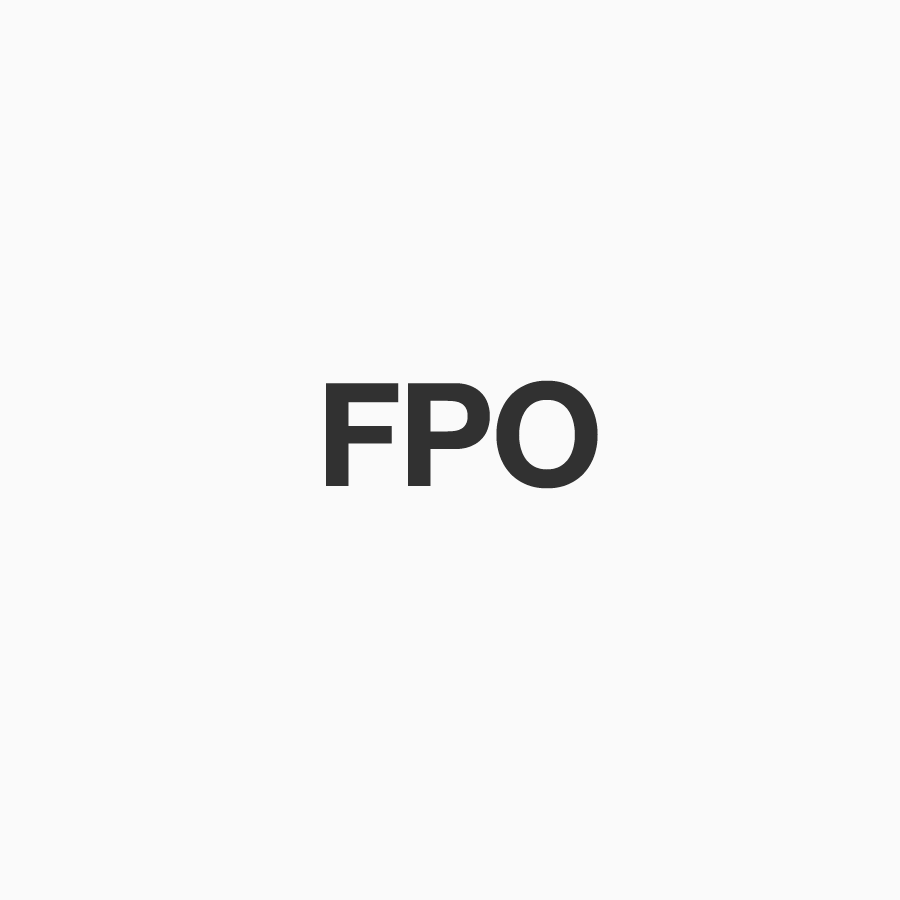
<style>
.page{position:relative;width:900px;height:900px;background:#fafafa}
.page>*{position:absolute;margin:0}
.t1{font:144px "HelveticaNeue-Bold";letter-spacing:-0.02em;color:#313131}
</style>
<div class="page">
<p class="t1" style="left:326px;top:380px;width:272px;height:109px">FPO</p>
</div>
